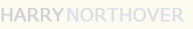
<style>
.page{position:relative;width:193px;height:29px;background:#fdfaf2}
.page>*{position:absolute;margin:0}
.t1{font:16.7px "Meiryo";color:#ced2d5;text-transform:uppercase;font-weight:bold;scale:1.08 1}
.t2{font:16.7px "MeiryoUI";color:#d9dfe3;text-transform:uppercase;font-weight:bold;scale:1.08 1}
</style>
<div class="page">
<p class="t1" style="left:1px;top:8px;width:63px;height:14px">harry</p>
<p class="t2" style="left:67px;top:8px;width:118px;height:14px">northover</p>
</div>
